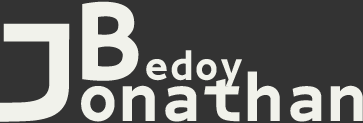
<style>
.page{position:relative;width:363px;height:123px;background:#333333}
.page>*{position:absolute;margin:0}
.t1{font:41.6px "BPmono-Bold";color:#f1f2eb}
.t2{font:110.8px "BPmono-Bold";color:#f1f2eb}
.t3{font:69.3px "BPmono-Bold";color:#f1f2eb}
.t4{font:138.5px "BPmono-Bold";color:#f1f2eb}
</style>
<div class="page">
<p class="t1" style="left:82px;top:1px;width:160px;height:87px"><span class="t2">B</span>edoy</p>
<p class="t3" style="left:0px;top:23px;width:363px;height:99px"><span class="t4">J</span>onathan</p>
</div>
